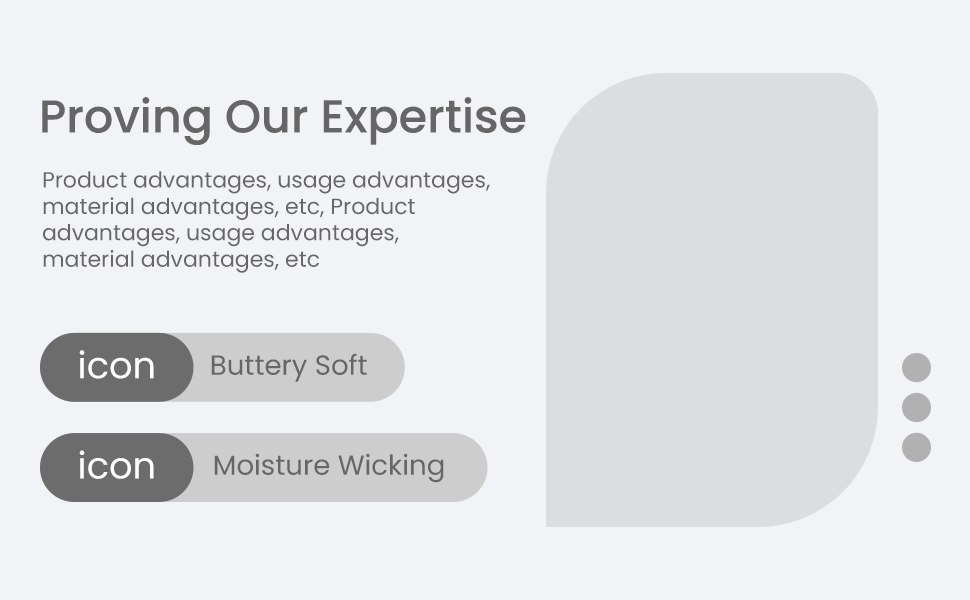
<style>
.page{position:relative;width:970px;height:600px;background:#f2f3f6}
.page>*{position:absolute;margin:0}
.t1{font:46px "Poppins-Medium";color:#666666}
.t2{font:22px "Poppins-Regular";color:#666666}
.t3{font:36.8px "Poppins-Regular";color:#ffffff}
.t4{font:27.6px "Poppins-Regular";color:#666666}
</style>
<div class="page">
<p class="t1" style="left:42px;top:97px;width:484px;height:48px">Proving Our Expertise</p>
<p class="t2" style="left:43px;top:171px;width:447px;height:102px">Product advantages, usage advantages,<br>material advantages, etc, Product<br>advantages, usage advantages,<br>material advantages, etc</p>
<p class="t3" style="left:79px;top:350px;width:75px;height:29px">icon</p>
<p class="t4" style="left:211px;top:353px;width:156px;height:29px">Buttery Soft</p>
<p class="t3" style="left:79px;top:450px;width:75px;height:29px">icon</p>
<p class="t4" style="left:214px;top:453px;width:230px;height:30px">Moisture Wicking</p>
</div>
